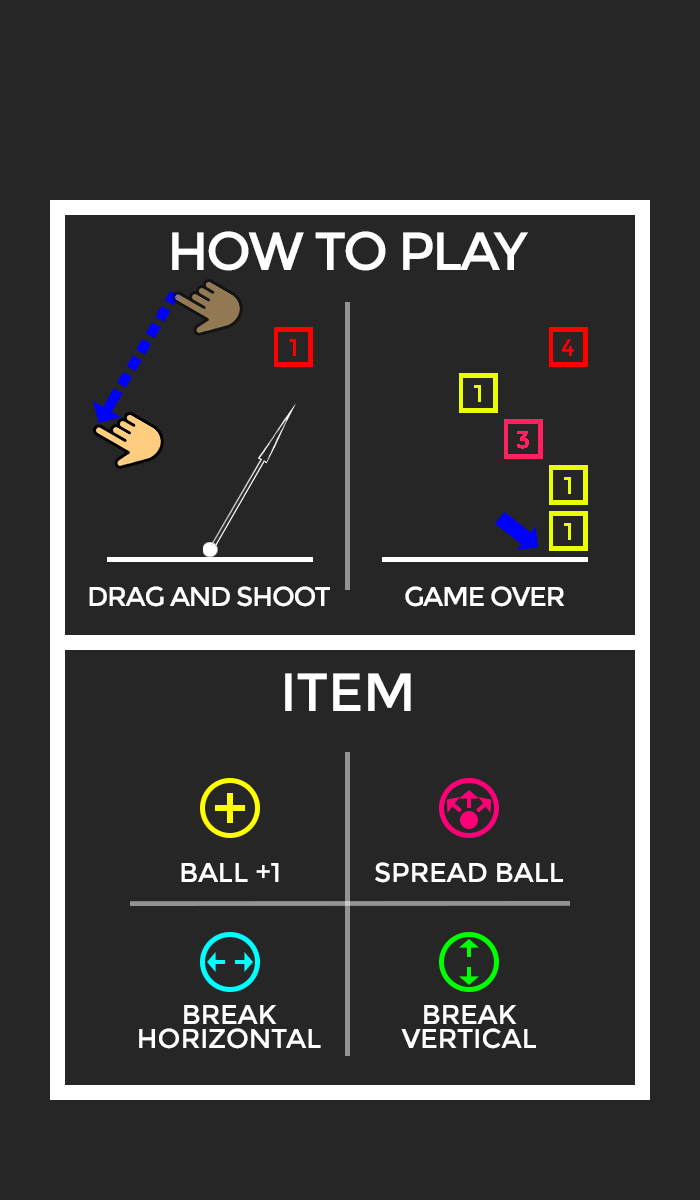
<style>
.page{position:relative;width:700px;height:1200px;background:#262626}
.page>*{position:absolute;margin:0}
.t1{font:53.9px "Montserrat-Regular";letter-spacing:-0.05em;color:#ffffff}
.t2{font:24px "Montserrat-Regular";letter-spacing:-0.05em;color:#ff0000}
.t3{font:27.3px "Montserrat-Regular";letter-spacing:-0.05em;color:#ffffff}
.t4{font:53.9px "Montserrat-Regular";letter-spacing:-0.01em;color:#ffffff}
.t5{font:27.3px "Montserrat-Regular";letter-spacing:-0.01em;color:#ffffff}
.t6{font:27.3px/24px "Montserrat-Regular";letter-spacing:-0.01em;color:#ffffff}
</style>
<div class="page">
<p class="t1" style="left:172px;top:231px;width:356px;height:40px">HOW TO PLAY</p>
<p class="t2" style="left:289px;top:339px;width:7px;height:17px">1</p>
<p class="t3" style="left:89px;top:586px;width:241px;height:21px">DRAG AND SHOOT</p>
<p class="t3" style="left:405px;top:586px;width:160px;height:21px">GAME OVER</p>
<p class="t4" style="left:285px;top:673px;width:126px;height:38px">ITEM</p>
<p class="t5" style="left:181px;top:863px;width:98px;height:19px">BALL +1</p>
<p class="t5" style="left:375px;top:862px;width:188px;height:21px">SPREAD BALL</p>
<p class="t6" style="left:139px;top:1005px;width:182px;height:44px;text-align:center">BREAK<br>HORIZONTAL</p>
<p class="t6" style="left:401px;top:1005px;width:135px;height:44px;text-align:center">BREAK<br>VERTICAL</p>
</div>
